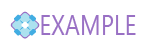
<style>
.page{position:relative;width:145px;height:50px;background:#ffffff}
.page>*{position:absolute;margin:0}
.t1{font:28.3px "SegoeUI";color:#9970c4;scale:0.82 1}
</style>
<div class="page">
<p class="t1" style="left:41px;top:15px;width:95px;height:20px">EXAMPLE</p>
</div>
